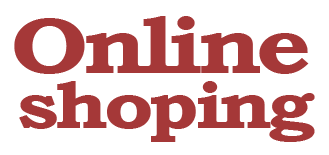
<style>
.page{position:relative;width:329px;height:155px;background:#ffffff}
.page>*{position:absolute;margin:0}
.t1{font:79.2px "BookmanOldStyle-Bold";letter-spacing:-0.06em;color:#a53838;scale:1.21 1}
.t2{font:66px "BookmanOldStyle-Bold";letter-spacing:-0.06em;color:#a53838;scale:1.21 1}
</style>
<div class="page">
<p class="t1" style="left:14px;top:16px;width:295px;height:58px">Online</p>
<p class="t2" style="left:19px;top:81px;width:296px;height:61px">shoping</p>
</div>
